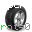
<style>
.page{position:relative;width:32px;height:32px;background:#ffffff}
.page>*{position:absolute;margin:0}
.t1{font:9px "Monaco";letter-spacing:0.06em;color:#00ff18}
</style>
<div class="page">
<p class="t1" style="left:1px;top:23px;width:29px;height:7px">rot=0</p>
</div>
